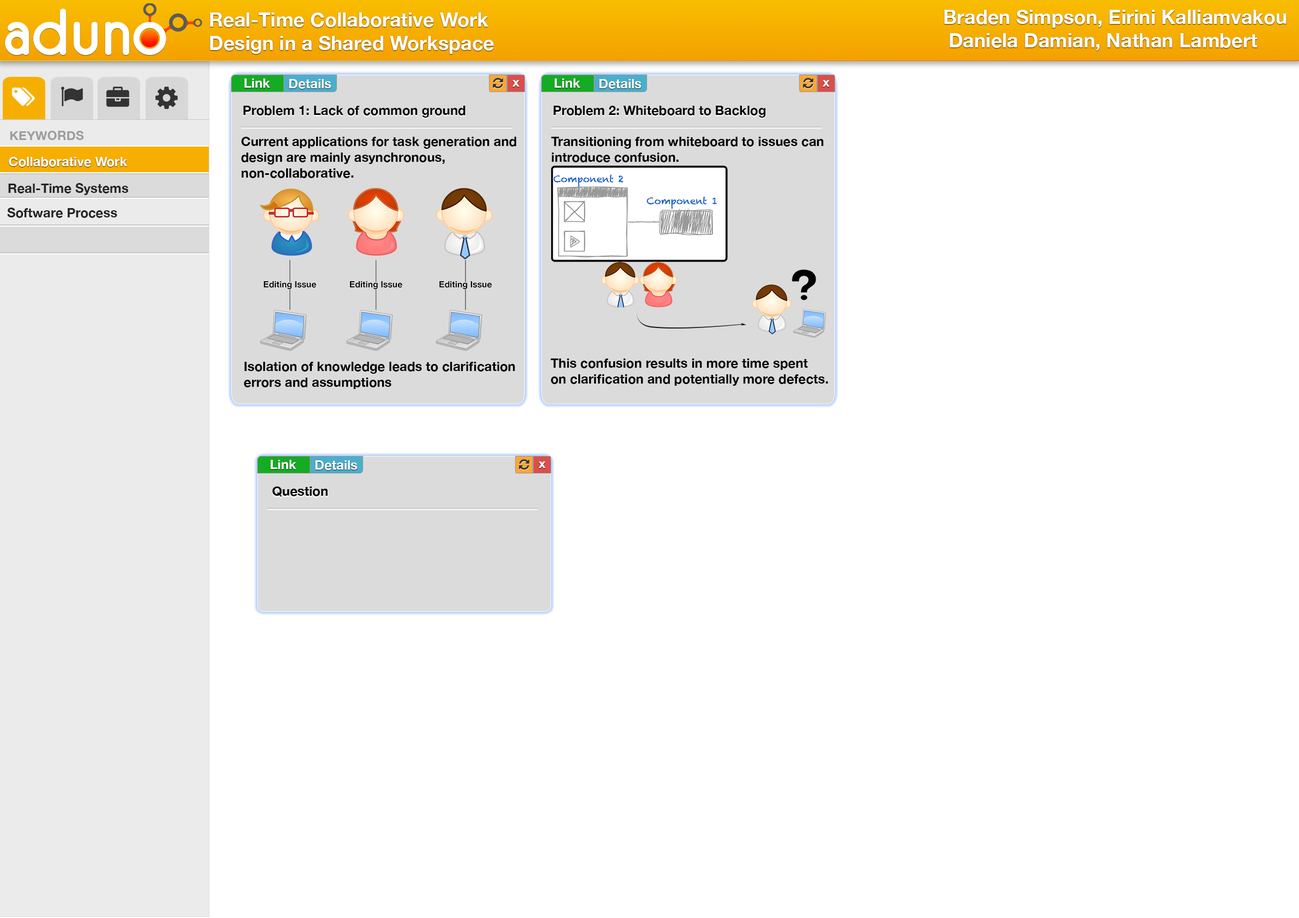
<style>
.page{position:relative;width:1299px;height:918px;background:#ffffff}
.page>*{position:absolute;margin:0}
.t1{font:19.6px "HelveticaNeue-Bold";color:#ffffff}
.t2{font:13.1px "HelveticaNeue-Bold";color:#ffffff}
.t3{font:13.1px "HelveticaNeue-Bold";color:#000000}
.t4{font:12.7px "HelveticaNeue-Bold";color:#9d9d9d}
.t5{font:13.1px "HelveticaNeue-Bold";color:#222222}
</style>
<div class="page">
<p class="t1" style="left:210px;top:13px;width:284px;height:41px">Real-Time Collaborative Work<br>Design in a Shared Workspace</p>
<p class="t1" style="left:944px;top:10px;width:342px;height:41px">Braden Simpson, Eirini Kalliamvakou<br> Daniela Damian, Nathan Lambert</p>
<p class="t2" style="left:244px;top:78px;width:26px;height:10px">Link</p>
<p class="t2" style="left:289px;top:79px;width:42px;height:10px">Details</p>
<p class="t2" style="left:512px;top:80px;width:7px;height:7px">x</p>
<p class="t2" style="left:554px;top:78px;width:26px;height:10px">Link</p>
<p class="t2" style="left:599px;top:79px;width:42px;height:10px">Details</p>
<p class="t2" style="left:822px;top:80px;width:7px;height:7px">x</p>
<p class="t3" style="left:243px;top:106px;width:222px;height:12px">Problem 1: Lack of common ground</p>
<p class="t3" style="left:553px;top:106px;width:213px;height:12px">Problem 2: Whiteboard to Backlog</p>
<p class="t4" style="left:10px;top:131px;width:74px;height:9px">KEYWORDS</p>
<p class="t3" style="left:241px;top:137px;width:275px;height:41px">Current applications for task generation and <br>design are mainly asynchronous, <br>non-collaborative.</p>
<p class="t3" style="left:551px;top:137px;width:272px;height:25px">Transitioning from whiteboard to issues can <br>introduce confusion.</p>
<p class="t2" style="left:9px;top:157px;width:119px;height:10px">Collaborative Work</p>
<p class="t5" style="left:8px;top:183px;width:121px;height:12px">Real-Time Systems</p>
<p class="t5" style="left:7px;top:208px;width:110px;height:10px">Software Process</p>
<p class="t3" style="left:244px;top:362px;width:271px;height:27px">Isolation of knowledge leads to clarification<br>errors and assumptions</p>
<p class="t3" style="left:550px;top:359px;width:278px;height:27px">This confusion results in more time spent<br>on clarification and potentially more defects.</p>
<p class="t2" style="left:270px;top:460px;width:26px;height:9px">Link</p>
<p class="t2" style="left:315px;top:460px;width:42px;height:10px">Details</p>
<p class="t2" style="left:538px;top:462px;width:7px;height:6px">x</p>
<p class="t3" style="left:272px;top:487px;width:56px;height:10px">Question</p>
<p class="t3" style="left:272px;top:487px;width:56px;height:10px">Question</p>
</div>
